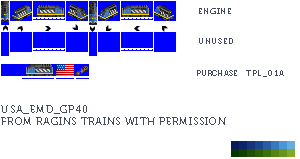
<style>
.page{position:relative;width:300px;height:159px;background:#ffffff}
.page>*{position:absolute;margin:0}
.t1{font:8px "Museo700-Regular";letter-spacing:0.075em;color:#444c5c;text-transform:uppercase}
.t2{font:8px "Museo700-Regular";color:#444c5c;text-transform:uppercase}
.t3{font:8px "Museo700-Regular";letter-spacing:0.1em;color:#444c5c;text-transform:uppercase}
.t4{font:10px "Museo700-Regular";letter-spacing:0.075em;color:#444c5c;text-transform:uppercase}
</style>
<div class="page">
<p class="t1" style="left:199px;top:8px;width:32px;height:6px">Engine</p>
<p class="t1" style="left:199px;top:38px;width:34px;height:6px">Unused</p>
<p class="t2" style="left:197px;top:70px;width:40px;height:6px">Purchase</p>
<p class="t3" style="left:246px;top:70px;width:38px;height:7px">tpl_01a</p>
<p class="t4" style="left:1px;top:105px;width:225px;height:20px">USA_EMD_GP40<br>from ragins trains with permission</p>
</div>
